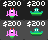
<style>
.page{position:relative;width:48px;height:40px;background:#4c4c4c}
.page>*{position:absolute;margin:0}
.t1{font:8px "04b03";letter-spacing:-0.05em;color:#ffffff}
</style>
<div class="page">
<p class="t1" style="left:3px;top:1px;width:18px;height:6px">$200</p>
<p class="t1" style="left:27px;top:1px;width:18px;height:6px">$200</p>
<p class="t1" style="left:3px;top:21px;width:18px;height:6px">$200</p>
<p class="t1" style="left:27px;top:21px;width:18px;height:6px">$200</p>
</div>
